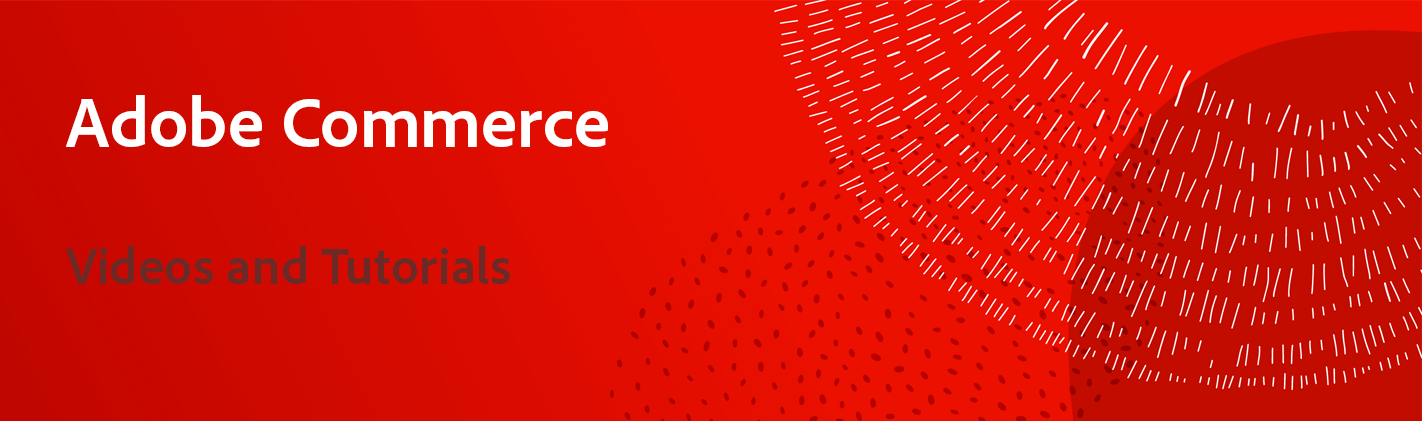
<style>
.page{position:relative;width:1422px;height:421px;background:#eb1000}
.page>*{position:absolute;margin:0}
.t1{font:72px "AdobeClean-Bold";color:#ffffff}
.t2{font:52px "AdobeClean-Bold";color:#6c2925}
</style>
<div class="page">
<p class="t1" style="left:66px;top:95px;width:542px;height:52px">Adobe Commerce</p>
<p class="t2" style="left:66px;top:246px;width:444px;height:38px">Videos and Tutorials</p>
</div>
